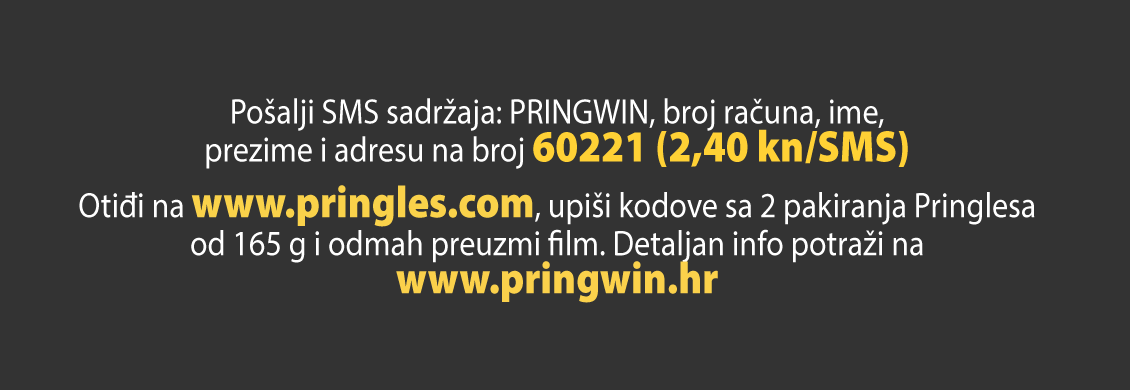
<style>
.page{position:relative;width:1130px;height:390px;background:#333333}
.page>*{position:absolute;margin:0}
.t1{font:35.7px/37.9px "MyriadPro-Regular";color:#ffffff;scale:0.9 1}
.t2{font:44.6px/37.9px "MyriadPro-Black";color:#ffd135;scale:0.9 1}
.t3{font:44.6px/37.9px "MyriadPro-Black";color:#fad24a;scale:0.9 1}
.t4{font:44.6px/37.9px "MyriadPro-Black";color:#fbd14b;scale:0.9 1}
</style>
<div class="page">
<p class="t1" style="left:79px;top:98px;width:956px;height:205px;text-align:center">Pošalji SMS sadržaja: PRINGWIN, broj računa, ime,<br>prezime i adresu na broj <span class="t2">60221 (2,40 kn/SMS)<br><br></span>Otiđi na <span class="t3">www.pringles.com</span>, upiši kodove sa 2 pakiranja Pringlesa<br>od 165 g i odmah preuzmi film. Detaljan info potraži na<br><span class="t4">www.pringwin.hr</span></p>
</div>
